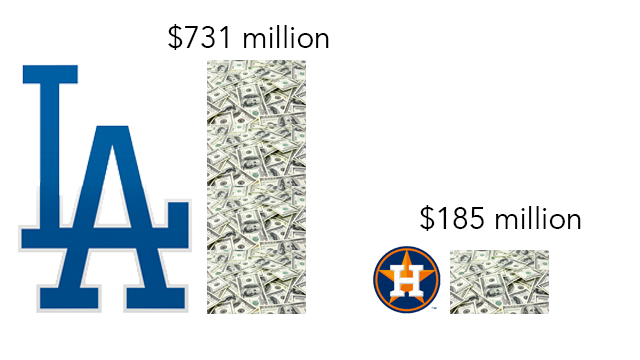
<style>
.page{position:relative;width:640px;height:360px;background:#ffffff}
.page>*{position:absolute;margin:0}
.t1{font:30px "Avenir-Book";color:#000000}
</style>
<div class="page">
<p class="t1" style="left:168px;top:24px;width:161px;height:26px">$731 million</p>
<p class="t1" style="left:420px;top:205px;width:161px;height:26px">$185 million</p>
</div>
